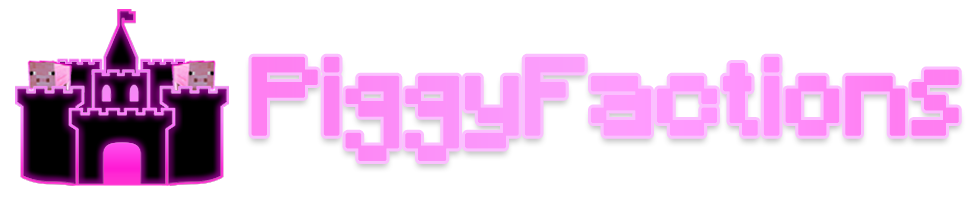
<style>
.page{position:relative;width:978px;height:200px;background:#ffffff}
.page>*{position:absolute;margin:0}
.t1{font:101.4px "Minecraft";color:#fe8ff9;font-weight:bold}
</style>
<div class="page">
<p class="t1" style="left:251px;top:56px;width:708px;height:105px">PiggyFactions</p>
</div>
